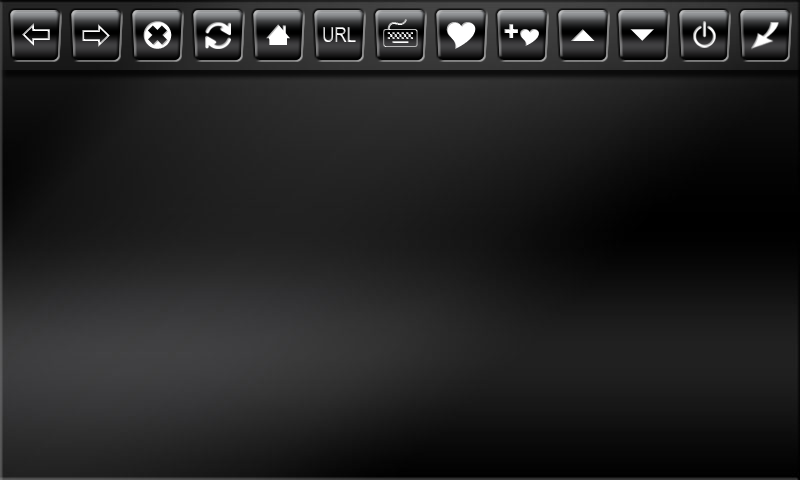
<style>
.page{position:relative;width:800px;height:480px}
.page>*{position:absolute;margin:0}
.t1{font:20.8px "ArialNarrow"}
</style>
<div class="page">
<p class="t1" style="left:323px;top:27px;width:33px;height:15px">URL</p>
</div>
